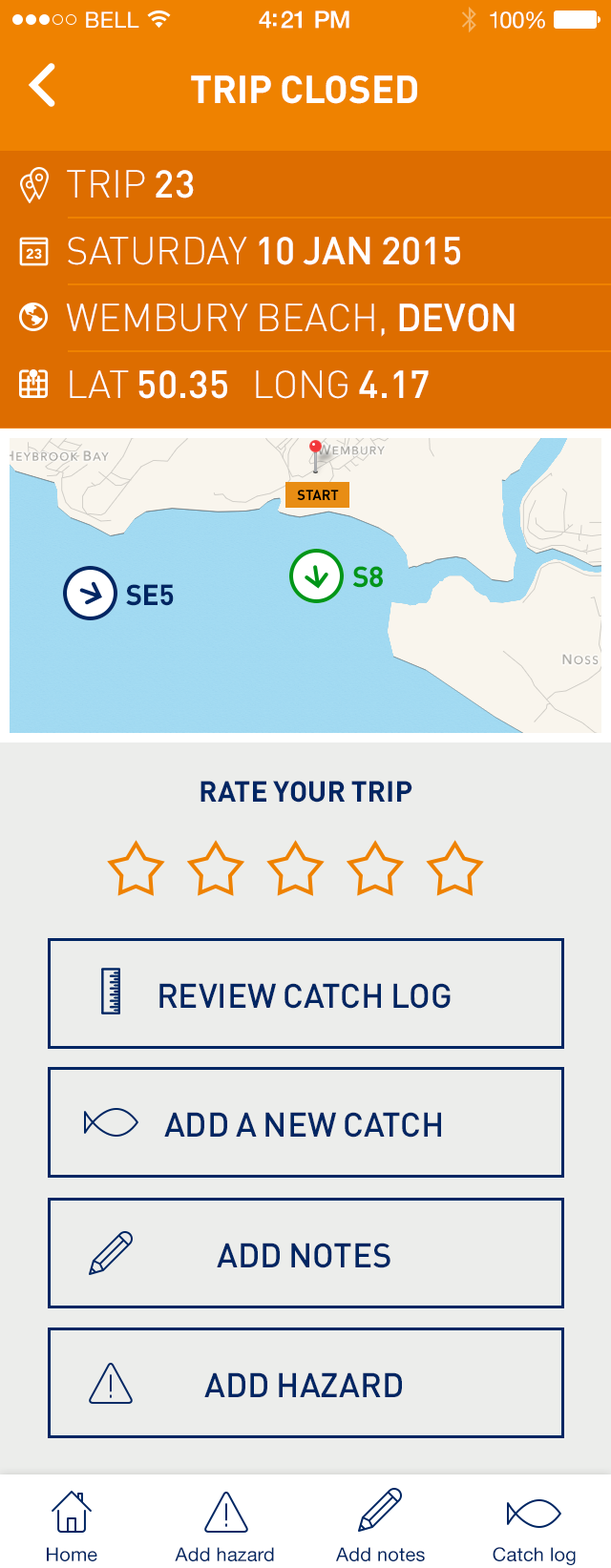
<style>
.page{position:relative;width:611px;height:1568px;background:#ecedeb}
.page>*{position:absolute;margin:0}
.t1{font:22px "HelveticaNeue";letter-spacing:0.02em;color:#ffffff}
.t2{font:23.9px "HelveticaNeue-Medium";letter-spacing:-0.02em;color:#ffffff}
.t3{font:22.9px "HelveticaNeue";letter-spacing:-0.02em;color:#ffffff}
.t4{font:38.2px "DIN-Bold";color:#ffffff;text-transform:uppercase}
.t5{font:38.2px/66.8px "DIN-Light";color:#ffffff;text-transform:uppercase}
.t6{font:38.2px/66.8px "DIN-Medium";color:#ffffff;text-transform:uppercase}
.t7{font:14.3px "DIN-Bold";letter-spacing:-0.015em;color:#000000;text-transform:uppercase}
.t8{font:28.6px "DIN-Bold";letter-spacing:-0.015em;color:#009619;text-transform:uppercase}
.t9{font:28.6px "DIN-Bold";letter-spacing:-0.015em;color:#002663;text-transform:uppercase}
.t10{font:28.6px "DIN-Bold";color:#002663;text-transform:uppercase}
.t11{font:33.4px "DIN-Medium";color:#002663;text-transform:uppercase}
.t12{font:19.1px "HelveticaNeue";letter-spacing:0.01em;color:#002663}
</style>
<div class="page">
<p class="t1" style="left:86px;top:11px;width:53px;height:17px">BELL</p>
<p class="t2" style="left:259px;top:10px;width:90px;height:19px">4:21 PM</p>
<p class="t3" style="left:490px;top:11px;width:55px;height:18px">100%</p>
<p class="t4" style="left:191px;top:75px;width:226px;height:29px">trip closed</p>
<p class="t5" style="left:66px;top:170px;width:448px;height:229px">trip <span class="t6">23<br></span>Saturday <span class="t6">10 JAN 2015<br></span>wembury beach, <span class="t6">devon<br></span>LAT <span class="t6">50.35</span>   LONG <span class="t6">4.17</span></p>
<p class="t7" style="left:297px;top:490px;width:42px;height:10px">START</p>
<p class="t8" style="left:352px;top:566px;width:31px;height:22px">S8</p>
<p class="t9" style="left:126px;top:584px;width:48px;height:22px">SE5</p>
<p class="t10" style="left:200px;top:781px;width:212px;height:22px">rate your trip</p>
<p class="t11" style="left:159px;top:983px;width:291px;height:26px">review catch log</p>
<p class="t11" style="left:164px;top:1112px;width:277px;height:26px">add a new catch</p>
<p class="t11" style="left:217px;top:1243px;width:173px;height:25px">add notes</p>
<p class="t11" style="left:204px;top:1372px;width:198px;height:25px">add hazard</p>
<p class="t12" style="left:47px;top:1547px;width:50px;height:14px">Home</p>
<p class="t12" style="left:175px;top:1547px;width:99px;height:14px">Add hazard</p>
<p class="t12" style="left:336px;top:1547px;width:89px;height:14px">Add notes</p>
<p class="t12" style="left:492px;top:1547px;width:83px;height:18px">Catch log</p>
</div>
